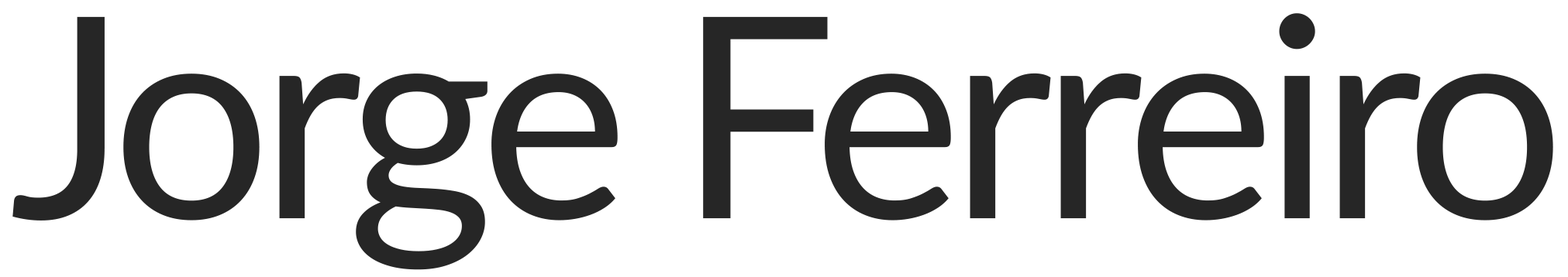
<style>
.page{position:relative;width:1568px;height:277px;background:#ffffff}
.page>*{position:absolute;margin:0}
.t1{font:281px "Lato-Regular";letter-spacing:-0.04em;color:#262626}
</style>
<div class="page">
<p class="t1" style="left:12px;top:13px;width:1541px;height:258px">Jorge Ferreiro</p>
</div>
